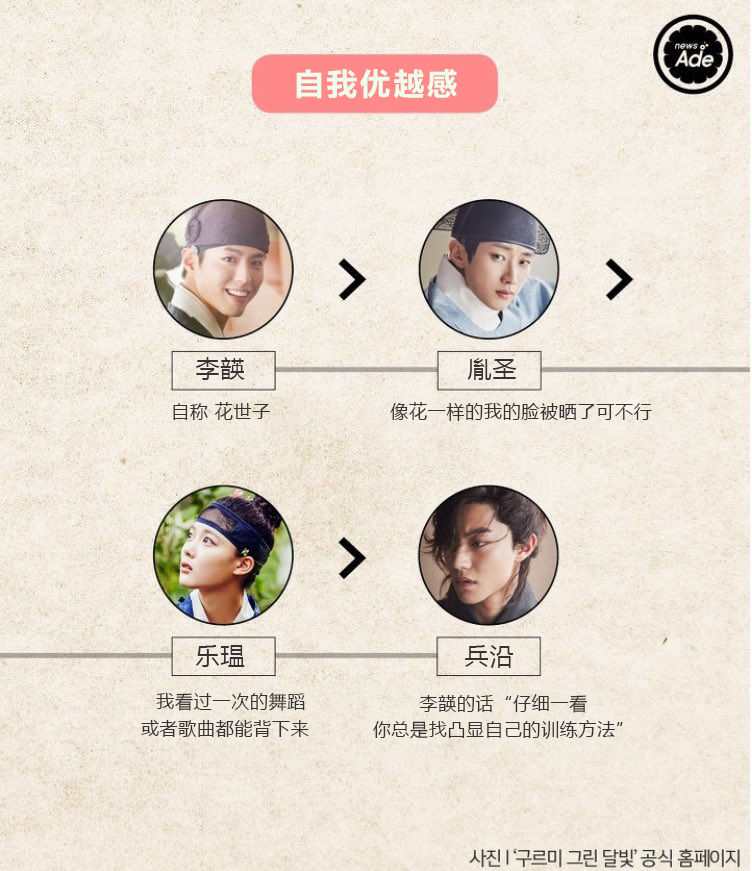
<style>
.page{position:relative;width:752px;height:871px}
.page>*{position:absolute;margin:0}
.t1{font:32px "FZLTCHK--GBK1-0";letter-spacing:0.04em;color:#efffee}
.t2{font:24px "MicrosoftYaHei";letter-spacing:0.04em;color:#333333}
.t3{font:18px "MicrosoftYaHei";letter-spacing:0.04em;color:#333333}
.t4{font:18px/26.7px "MicrosoftYaHei";letter-spacing:0.04em;color:#333333}
</style>
<div class="page">
<p class="t1" style="left:296px;top:69px;width:161px;height:30px">自我优越感</p>
<p class="t2" style="left:195px;top:357px;width:50px;height:23px">李韺</p>
<p class="t2" style="left:467px;top:358px;width:50px;height:22px">胤圣</p>
<p class="t3" style="left:173px;top:402px;width:98px;height:18px">自称 花世子</p>
<p class="t3" style="left:390px;top:402px;width:262px;height:19px">像花一样的我的脸被晒了可不行</p>
<p class="t2" style="left:196px;top:645px;width:49px;height:22px">乐瑥</p>
<p class="t2" style="left:465px;top:645px;width:49px;height:23px">兵沿</p>
<p class="t4" style="left:141px;top:692px;width:168px;height:45px;text-align:center">我看过一次的舞蹈<br>或者歌曲都能背下来</p>
<p class="t4" style="left:373px;top:694px;width:250px;height:45px;text-align:center">李韺的话“仔细一看<br>你总是找凸显自己的训练方法”</p>
</div>
